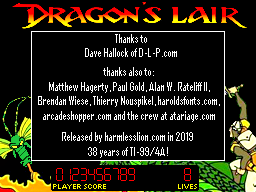
<style>
.page{position:relative;width:256px;height:192px;background:#000000}
.page>*{position:absolute;margin:0}
.t1{font:12px "AgencyFB-Reg";color:#ffffff}
</style>
<div class="page">
<p class="t1" style="left:85px;top:34px;width:92px;height:23px;text-align:center">Thanks to<br>Dave Hallock of D-L-P.com</p>
<p class="t1" style="left:38px;top:67px;width:182px;height:55px;text-align:center">thanks also to:<br>Matthew Hagerty, Paul Gold, Alan W. Rateliff II,<br>Brendan Wiese, Thierry Nouspikel, haroldsfonts.com,<br>arcadeshopper.com and the crew at atariage.com</p>
<p class="t1" style="left:62px;top:132px;width:131px;height:26px;text-align:center">Released by harmlesslion.com in 2019<br>38 years of TI-99/4A!</p>
</div>
